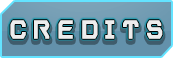
<style>
.page{position:relative;width:173px;height:58px;background:#6391ab}
.page>*{position:absolute;margin:0}
.t1{font:25px "VoyagerGrotesqueBold";letter-spacing:0.3em;color:#ffffff}
</style>
<div class="page">
<p class="t1" style="left:10px;top:20px;width:153px;height:19px">CREDITS</p>
</div>
